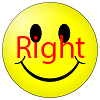
<style>
.page{position:relative;width:100px;height:100px;background:#ffffff}
.page>*{position:absolute;margin:0}
.t1{font:32px "MyriadPro-Regular";color:#ff0000}
</style>
<div class="page">
<p class="t1" style="left:17px;top:35px;width:68px;height:29px">Right</p>
</div>
